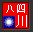
<style>
.page{position:relative;width:33px;height:32px;background:#f20000}
.page>*{position:absolute;margin:0}
.t1{font:10.4px "SimSun";color:#ffffff}
.t2{font:11.7px "SimSun";color:#ffffff}
</style>
<div class="page">
<p class="t1" style="left:6px;top:4px;width:19px;height:9px">八四</p>
<p class="t2" style="left:16px;top:15px;width:11px;height:12px">川</p>
</div>
